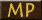
<style>
.page{position:relative;width:42px;height:20px}
.page>*{position:absolute;margin:0}
.t1{font:18.7px "TempusSansITC";color:#dab540;font-weight:bold}
</style>
<div class="page">
<p class="t1" style="left:7px;top:2px;width:28px;height:15px">MP</p>
<p class="t1" style="left:7px;top:2px;width:28px;height:15px">MP</p>
</div>
